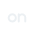
<style>
.page{position:relative;width:34px;height:34px;background:#ffffff}
.page>*{position:absolute;margin:0}
.t1{font:16px "Comfortaa-Bold";color:#ecf0f3}
</style>
<div class="page">
<p class="t1" style="left:7px;top:13px;width:20px;height:10px">on</p>
</div>
